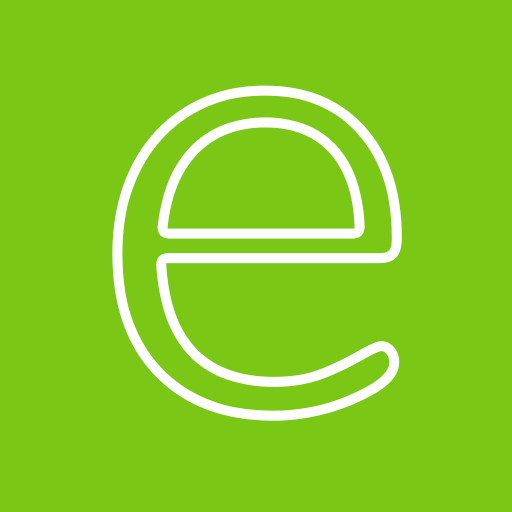
<style>
.page{position:relative;width:512px;height:512px;background:#7bc715}
.page>*{position:absolute;margin:0}
.t1{font:662px "Nunito-Regular"}
</style>
<div class="page">
<p class="t1" style="left:112px;top:85px;width:290px;height:336px">e</p>
</div>
